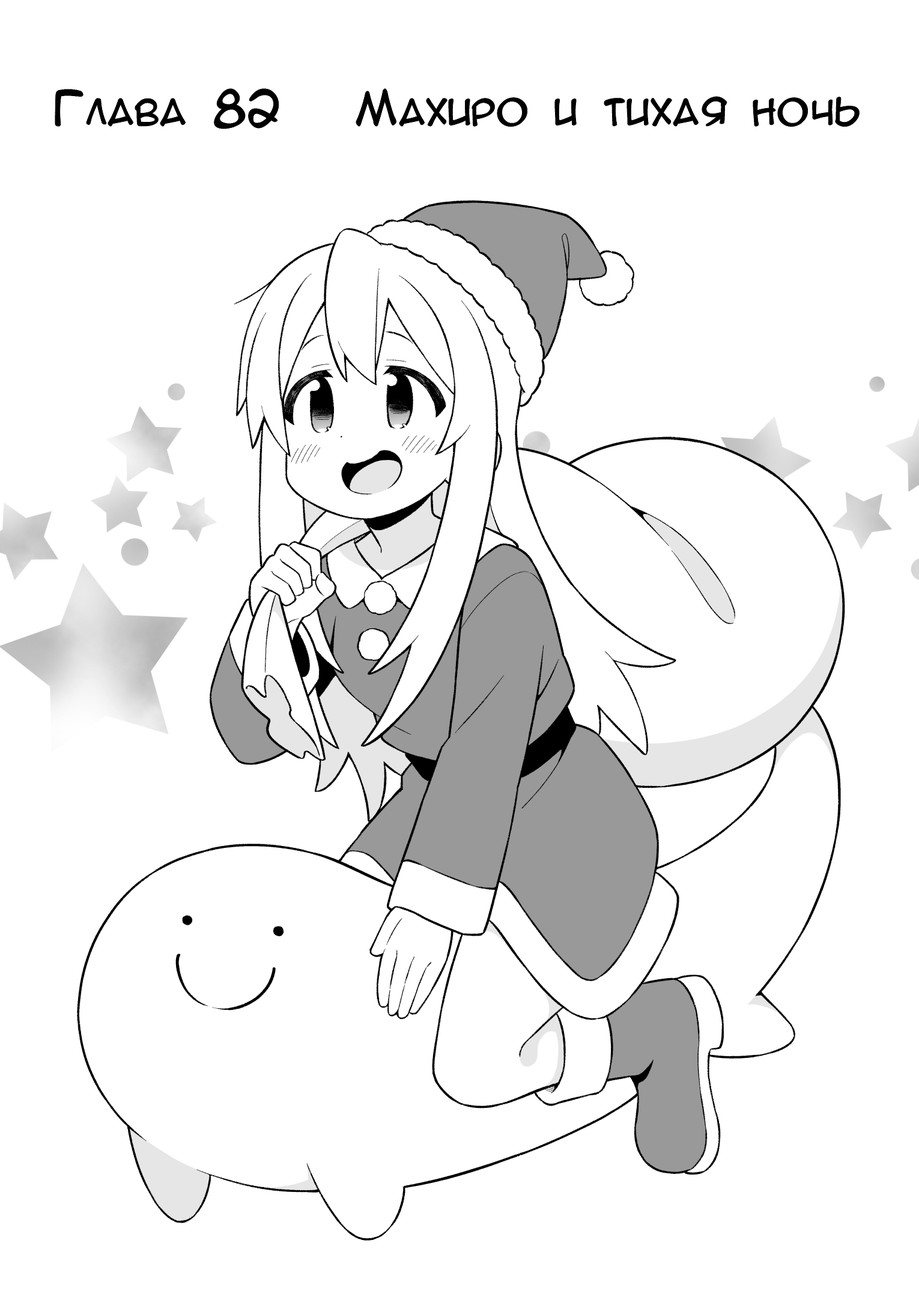
<style>
.page{position:relative;width:919px;height:1297px;background:#ffffff}
.page>*{position:absolute;margin:0}
.t1{font:42.5px "AnimeAcev3";color:#010101}
</style>
<div class="page">
<p class="t1" style="left:55px;top:89px;width:805px;height:40px">Глава 82   Махиро и тихая ночь</p>
</div>
